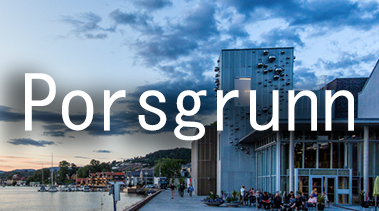
<style>
.page{position:relative;width:379px;height:211px}
.page>*{position:absolute;margin:0}
.t1{font:75px "MS-Gothic";color:#ffffff}
</style>
<div class="page">
<p class="t1" style="left:25px;top:73px;width:329px;height:68px">Porsgrunn</p>
</div>
